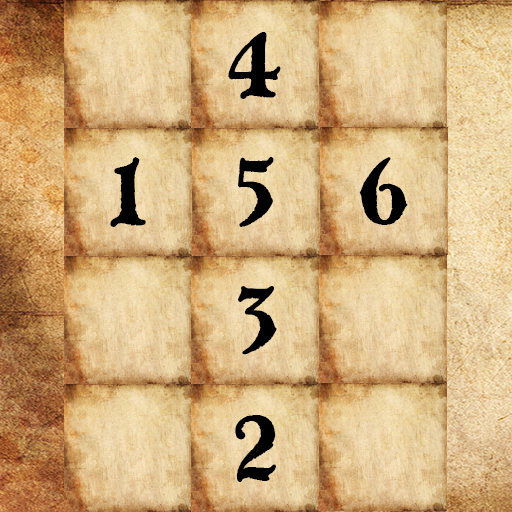
<style>
.page{position:relative;width:512px;height:512px}
.page>*{position:absolute;margin:0}
.t1{font:100px "BlackwoodCastle";color:#000000}
</style>
<div class="page">
<p class="t1" style="left:228px;top:32px;width:53px;height:67px">4</p>
<p class="t1" style="left:110px;top:157px;width:36px;height:70px">1</p>
<p class="t1" style="left:238px;top:157px;width:36px;height:70px">5</p>
<p class="t1" style="left:359px;top:157px;width:49px;height:68px">6</p>
<p class="t1" style="left:238px;top:286px;width:39px;height:69px">3</p>
<p class="t1" style="left:235px;top:415px;width:41px;height:67px">2</p>
</div>
